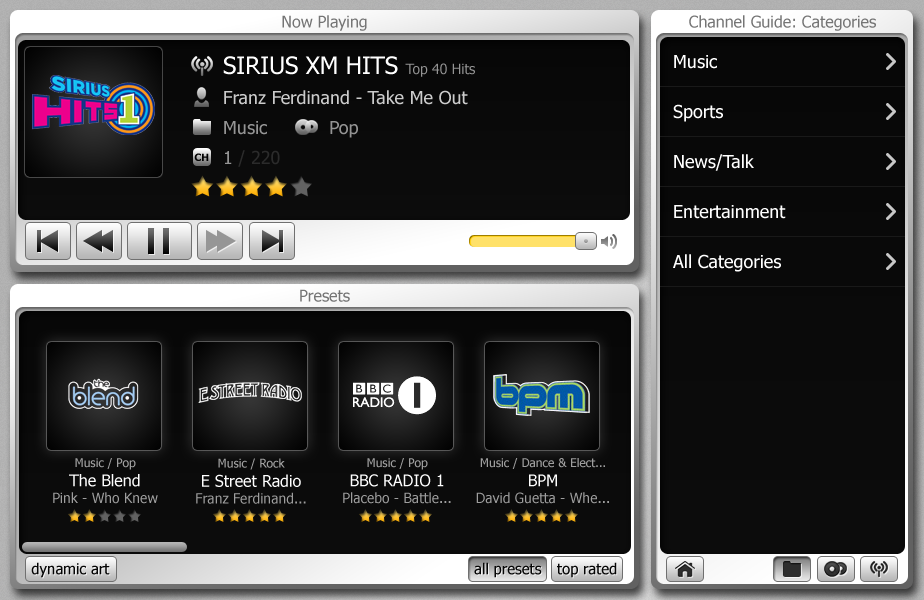
<style>
.page{position:relative;width:924px;height:600px}
.page>*{position:absolute;margin:0}
.t1{font:16px "Tahoma";color:#757575}
.t2{font:18px/30px "Tahoma";color:#cbcbcb}
.t3{font:24px/30px "Tahoma";color:#ffffff}
.t4{font:14px/30px "Tahoma";color:#949494}
.t5{font:18px/30px "Tahoma";color:#949494}
.t6{font:18px/30px "Tahoma";color:#2b2b2b}
.t7{font:18px "Tahoma";color:#ffffff}
.t8{font:10px "Tahoma-Bold";color:#000000}
.t9{font:14px "Tahoma";color:#9e9e9e}
.t10{font:12px "Tahoma";color:#9e9e9e}
.t11{font:16px "Tahoma";color:#ffffff}
.t12{font:15px "Tahoma";color:#060606}
</style>
<div class="page">
<p class="t1" style="left:282px;top:15px;width:85px;height:16px">Now Playing</p>
<p class="t1" style="left:689px;top:15px;width:187px;height:16px">Channel Guide: Categories</p>
<p class="t2" style="left:223px;top:56px;width:252px;height:111px"><span class="t3">SIRIUS XM HITS </span><span class="t4">Top 40 Hits<br></span>Franz Ferdinand - Take Me Out<br><span class="t5">Music           Pop<br>1 </span><span class="t6">/ 220</span></p>
<p class="t7" style="left:674px;top:55px;width:43px;height:14px">Music</p>
<p class="t7" style="left:673px;top:104px;width:50px;height:18px">Sports</p>
<p class="t8" style="left:194px;top:153px;width:15px;height:8px">CH</p>
<p class="t7" style="left:674px;top:154px;width:80px;height:17px">News/Talk</p>
<p class="t7" style="left:674px;top:205px;width:112px;height:14px">Entertainment</p>
<p class="t7" style="left:673px;top:254px;width:108px;height:18px">All Categories</p>
<p class="t1" style="left:300px;top:289px;width:50px;height:13px">Presets</p>
<p class="t9" style="left:53px;top:458px;width:105px;height:46px;text-align:center"><span class="t10">Music / Pop<br></span><span class="t11">The Blend<br></span>Pink - Who Knew</p>
<p class="t9" style="left:196px;top:458px;width:110px;height:46px;text-align:center"><span class="t10">Music / Rock<br></span><span class="t11">E Street Radio<br></span>Franz Ferdinand...</p>
<p class="t9" style="left:343px;top:458px;width:108px;height:46px;text-align:center"><span class="t10">Music / Pop<br></span><span class="t11">BBC RADIO 1<br></span>Placebo - Battle...</p>
<p class="t10" style="left:476px;top:458px;width:133px;height:46px;text-align:center">Music / Dance &amp; Elect...<br><span class="t11">BPM<br></span><span class="t9">David Guetta - Whe...</span></p>
<p class="t12" style="left:31px;top:562px;width:79px;height:16px">dynamic art</p>
<p class="t12" style="left:474px;top:562px;width:68px;height:16px">all presets</p>
<p class="t12" style="left:557px;top:562px;width:60px;height:16px">top rated</p>
</div>
